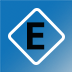
<style>
.page{position:relative;width:72px;height:72px}
.page>*{position:absolute;margin:0}
.t1{font:37.3px "BitstreamVeraSansMono-Bold";color:#010508}
</style>
<div class="page">
<p class="t1" style="left:27px;top:22px;width:18px;height:28px">E</p>
</div>
